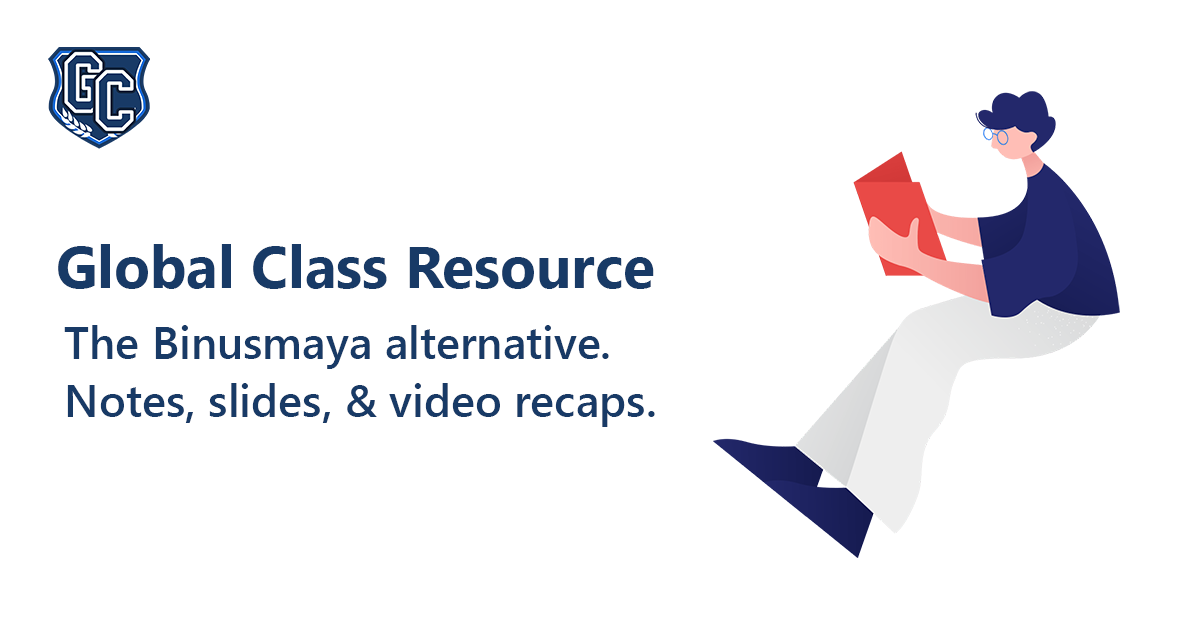
<style>
.page{position:relative;width:1200px;height:628px;background:#ffffff}
.page>*{position:absolute;margin:0}
.t1{font:59px "SegoeUI-Bold";color:#183a66}
.t2{font:45px/58px "SegoeUI-Semibold";color:#183a66}
.t3{font:45px/64.3px "SegoeUI-Semibold";color:#183a66}
</style>
<div class="page">
<p class="t1" style="left:58px;top:244px;width:596px;height:45px">Global Class Resource</p>
<p class="t2" style="left:64px;top:325px;width:591px;height:102px"><span class="t3">The Binusmaya alternative.<br></span>Notes, slides, &amp; video recaps.</p>
</div>
